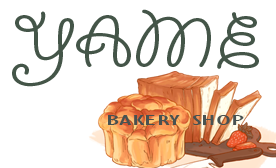
<style>
.page{position:relative;width:276px;height:168px;background:#ffffff}
.page>*{position:absolute;margin:0}
.t1{font:79.1px "GiddyupStd";color:#445548;font-variant:small-caps;scale:1.14 1}
.t2{font:15.4px "GillSansMT-Condensed";color:#485251;font-variant:small-caps;scale:2.27 1}
</style>
<div class="page">
<p class="t1" style="left:12px;top:9px;width:247px;height:78px">YAME</p>
<p class="t2" style="left:108px;top:115px;width:136px;height:10px">BAKERY SHOP</p>
</div>
